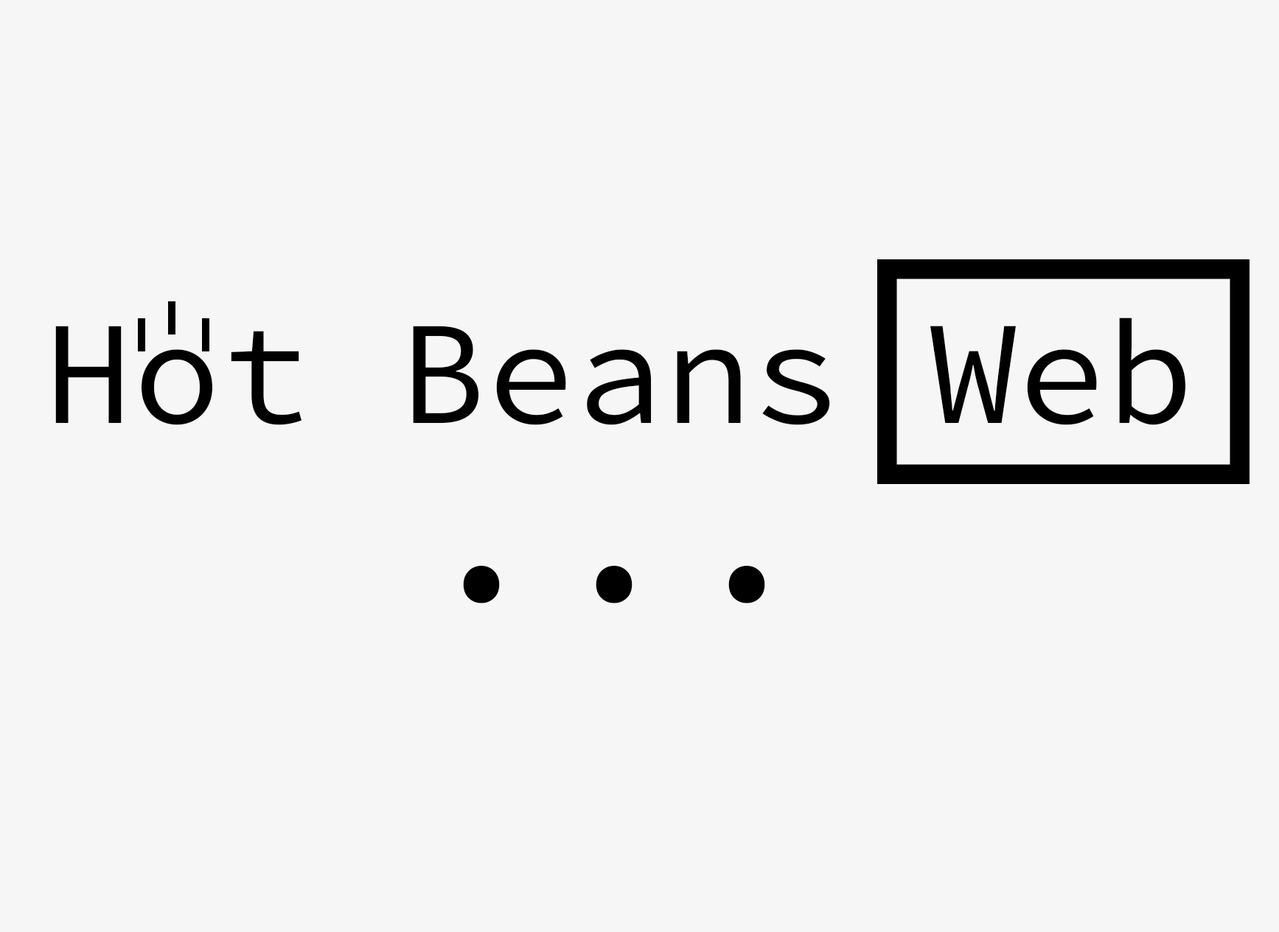
<style>
.page{position:relative;width:1279px;height:932px;background:#f6f6f6}
.page>*{position:absolute;margin:0}
.t1{font:147.4px "SourceCodePro-Regular";color:#000000}
.t2{font:221.1px "SourceCodePro-Regular";color:#000000}
</style>
<div class="page">
<p class="t1" style="left:55px;top:318px;width:1130px;height:107px">Hot Beans Web</p>
<p class="t2" style="left:463px;top:565px;width:302px;height:39px">...</p>
</div>
